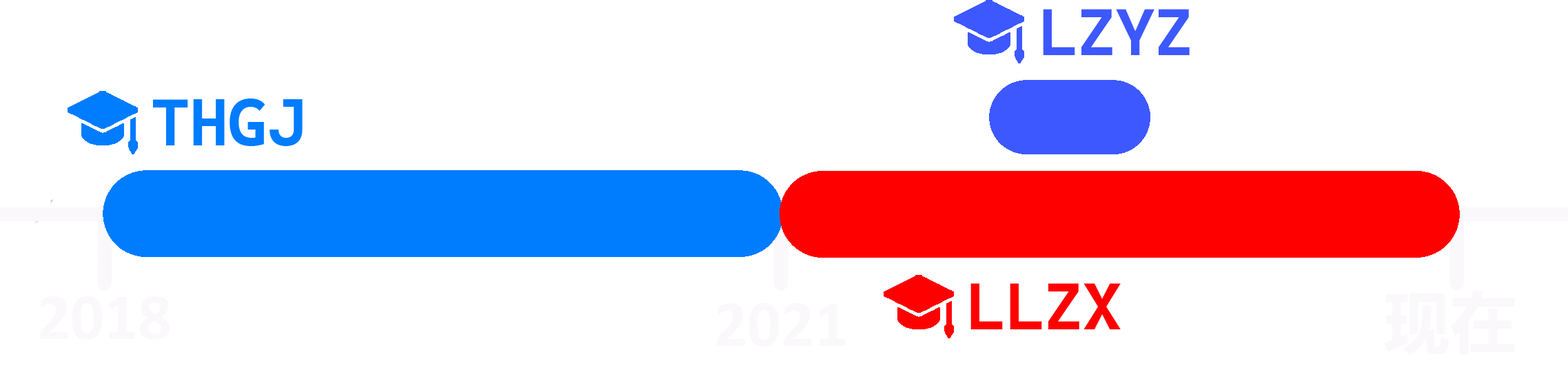
<style>
.page{position:relative;width:1568px;height:370px;background:#ffffff}
.page>*{position:absolute;margin:0}
.t1{font:66.2px "CascadiaCodeRoman-Bold";color:#3d58ff}
.t2{font:66.2px "CascadiaCodeRoman-Bold";color:#007cff}
.t3{font:66.2px "CascadiaCodeRoman-Bold";color:#ff0000}
.t4{font:66.2px "MicrosoftYaHeiUI-Bold";color:#faf8fb}
.t5{font:66.2px "Calibri-Bold";color:#faf8fb}
</style>
<div class="page">
<p class="t1" style="left:1043px;top:9px;width:147px;height:46px">LZYZ</p>
<p class="t2" style="left:153px;top:99px;width:150px;height:47px">THGJ</p>
<p class="t3" style="left:970px;top:283px;width:151px;height:46px">LLZX</p>
<p class="t4" style="left:1385px;top:291px;width:130px;height:65px">现在</p>
<p class="t5" style="left:40px;top:296px;width:130px;height:44px">2018</p>
<p class="t5" style="left:717px;top:303px;width:129px;height:44px">2021</p>
</div>
